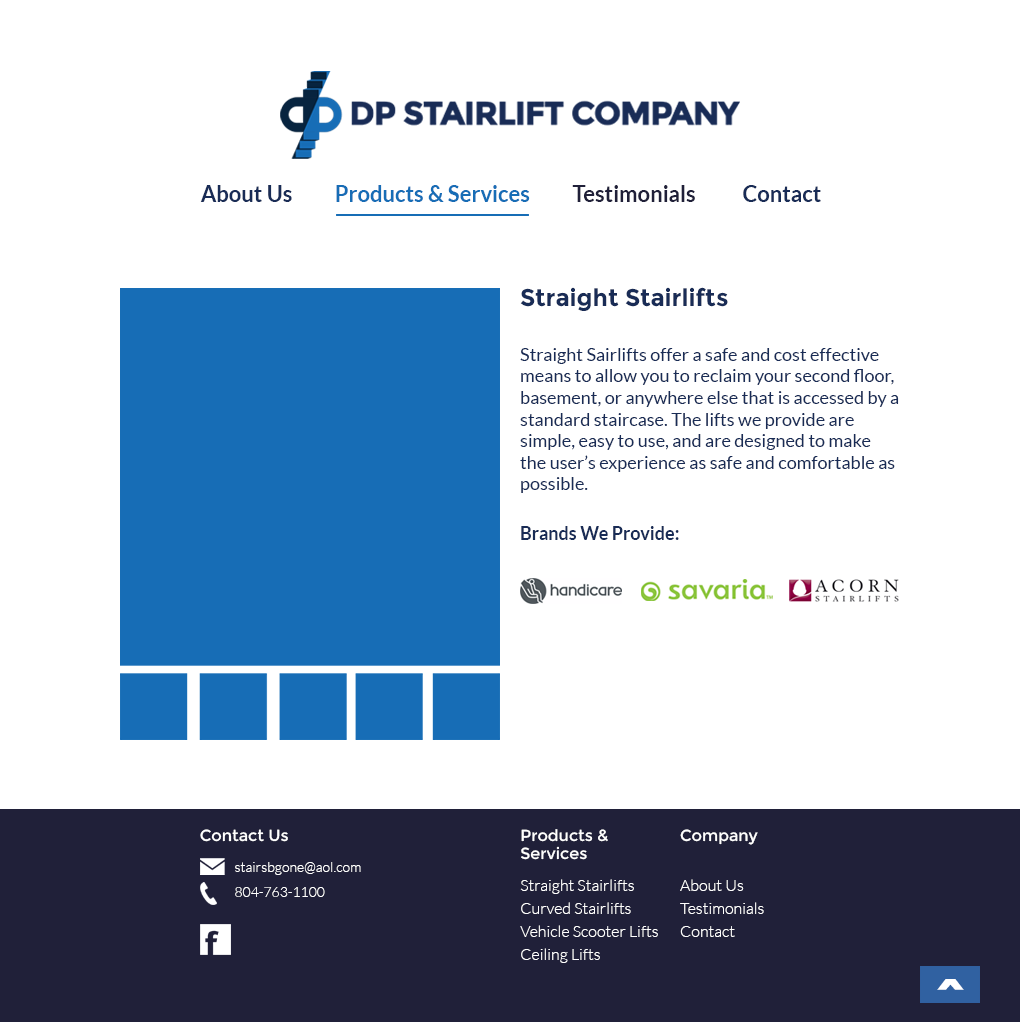
<style>
.page{position:relative;width:1020px;height:1022px;background:#ffffff}
.page>*{position:absolute;margin:0}
.t1{font:22px "Lato-Bold";color:#176db6}
.t2{font:22px "Lato-Bold";color:#192c56}
.t3{font:22px "Lato-Bold";color:#202039}
.t4{font:18px "Lato-Regular";color:#192c56}
.t5{font:24px "Montserrat-Bold";color:#192c56}
.t6{font:18px/55px "Lato-Regular";color:#192c56}
.t7{font:18px/28px "Lato-Bold";color:#192c56}
.t8{font:16px "Montserrat-Regular";color:#ffffff}
.t9{font:16px/23px "Lato-Light";color:#ffffff}
.t10{font:16px/20px "Montserrat-Regular";color:#ffffff}
.t11{font:16px/18px "Montserrat-Regular";color:#ffffff}
.t12{font:16px/16px "Lato-Light";color:#ffffff}
.t13{font:16px/16px "Montserrat-Regular";color:#ffffff}
.t14{font:16px/34px "Lato-Light";color:#ffffff}
.t15{font:14px/6px "Lato-Light";color:#ffffff}
.t16{font:14px/25px "Lato-Light";color:#ffffff}
.t17{font:60px "Montserrat-Bold";color:#ffffff}
</style>
<div class="page">
<p class="t1" style="left:200px;top:185px;width:621px;height:17px"><span class="t2">About Us          </span>Products &amp; Services          <span class="t3">Testimonials</span><span class="t2">           Contact</span></p>
<p class="t4" style="left:520px;top:287px;width:379px;height:253px"><span class="t5">Straight Stairlifts<br></span><span class="t6">Straight Sairlifts offer a safe and cost effective </span>means to allow you to reclaim your second floor, basement, or anywhere else that is accessed by a standard staircase. The lifts we provide are simple, easy to use, and are designed to make the user’s experience as safe and comfortable as possible.<br><br><span class="t7">Brands We Provide:</span></p>
<p class="t8" style="left:200px;top:829px;width:88px;height:13px">Contact Us</p>
<p class="t9" style="left:520px;top:829px;width:138px;height:134px"><span class="t10">Products &amp; <br></span><span class="t11">Services<br><br></span><span class="t12">Straight Stairlifts<br></span>Curved Stairlifts<br>Vehicle Scooter Lifts<br>Ceiling Lifts</p>
<p class="t9" style="left:680px;top:829px;width:84px;height:108px"><span class="t13">Company<br><br></span><span class="t14">About Us <br></span>Testimonials<br>Contact</p>
<p class="t15" style="left:235px;top:862px;width:126px;height:35px">stairsbgone@aol.com<br><span class="t16">804-763-1100</span></p>
<p class="t17" style="left:937px;top:979px;width:27px;height:11px">^</p>
</div>
